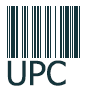
<style>
.page{position:relative;width:89px;height:89px;background:#ffffff}
.page>*{position:absolute;margin:0}
.t1{font:33.3px "Tahoma";color:#14343b}
</style>
<div class="page">
<p class="t1" style="left:7px;top:60px;width:59px;height:26px">UPC</p>
</div>
